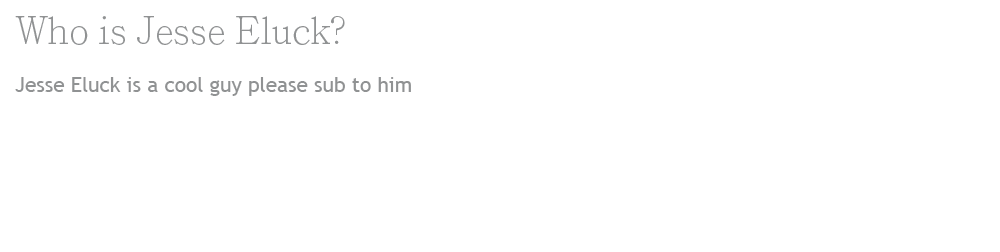
<style>
.page{position:relative;width:1000px;height:252px;background:#ffffff}
.page>*{position:absolute;margin:0}
.t1{font:37.5px "AdobeMingStd-Light";color:#909293}
.t2{font:20.8px "TrebuchetMS";color:#909293}
</style>
<div class="page">
<p class="t1" style="left:15px;top:16px;width:330px;height:29px">Who is Jesse Eluck?</p>
<p class="t2" style="left:15px;top:77px;width:396px;height:19px">Jesse Eluck is a cool guy please sub to him</p>
</div>
